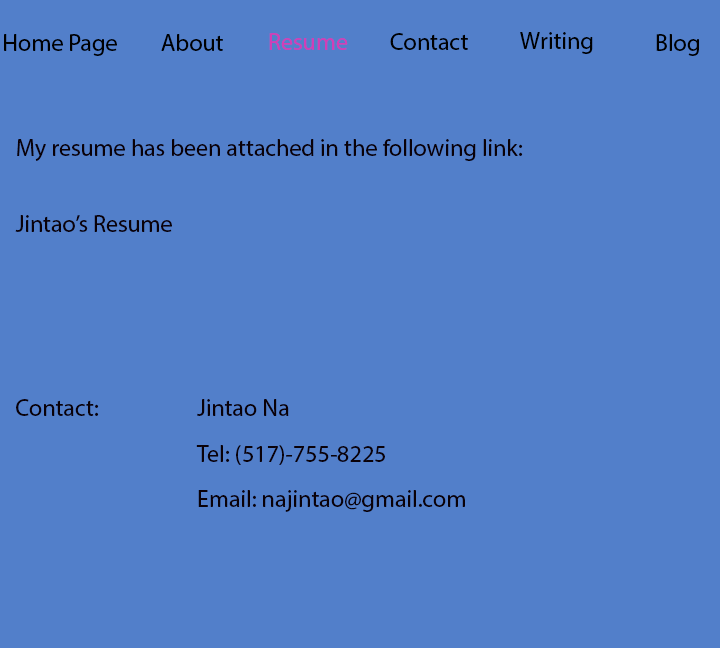
<style>
.page{position:relative;width:720px;height:648px;background:#527fca}
.page>*{position:absolute;margin:0}
.t1{font:24px "MyriadPro-Regular";color:#000000}
.t2{font:24px "MyriadPro-Regular";color:#d13eb7}
.t3{font:24px "MyriadPro-Regular";color:#0a0108}
</style>
<div class="page">
<p class="t1" style="left:4px;top:34px;width:113px;height:22px">Home Page</p>
<p class="t1" style="left:161px;top:34px;width:62px;height:17px">About</p>
<p class="t2" style="left:269px;top:33px;width:79px;height:17px">Resume</p>
<p class="t1" style="left:390px;top:33px;width:78px;height:17px">Contact</p>
<p class="t1" style="left:520px;top:32px;width:73px;height:22px">Writing</p>
<p class="t1" style="left:656px;top:34px;width:43px;height:22px">Blog</p>
<p class="t3" style="left:17px;top:139px;width:506px;height:22px">My resume has been attached in the following link:</p>
<p class="t3" style="left:15px;top:215px;width:157px;height:17px">Jintao’s Resume</p>
<p class="t3" style="left:16px;top:399px;width:83px;height:17px">Contact:</p>
<p class="t3" style="left:197px;top:399px;width:92px;height:17px">Jintao Na</p>
<p class="t3" style="left:196px;top:445px;width:189px;height:20px">Tel: (517)-755-8225</p>
<p class="t3" style="left:198px;top:490px;width:267px;height:22px">Email: najintao@gmail.com</p>
</div>
